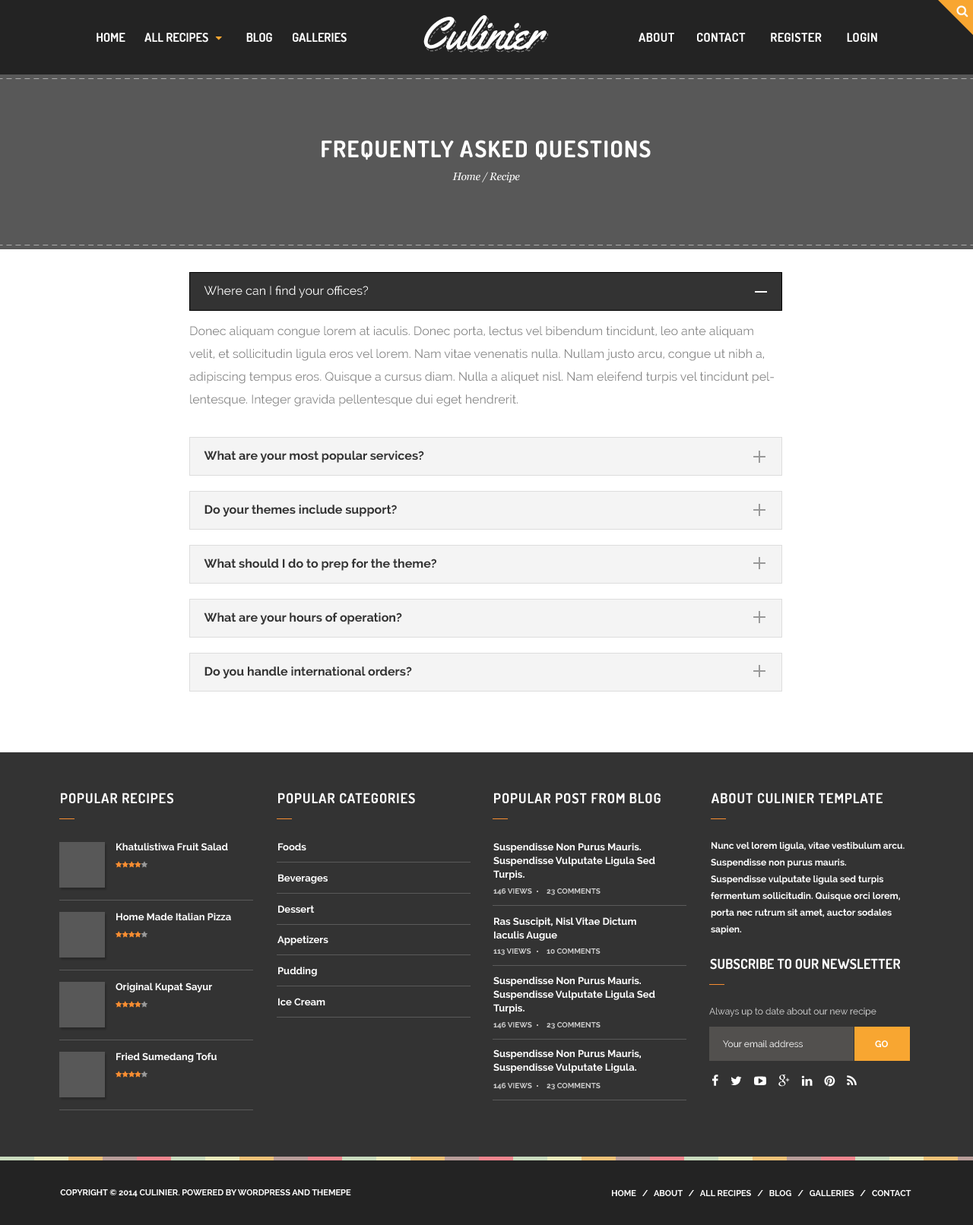
<style>
.page{position:relative;width:973px;height:1225px;background:#333333}
.page>*{position:absolute;margin:0}
.t1{font:45.6px "Yellowtail";color:#ffffff}
.t2{font:12.2px "Dosis-Bold";letter-spacing:0.025em;color:#ffffff;text-transform:uppercase}
.t3{font:22.8px "Dosis-Bold";letter-spacing:0.05em;color:#ffffff;text-transform:uppercase}
.t4{font:10.6px "Georgia-Italic";letter-spacing:-0.025em;color:#ffffff}
.t5{font:12.2px "Raleway";color:#ffffff}
.t6{font:12.2px/22.8px "Raleway";color:#878787}
.t7{font:12.2px "Raleway-Bold";color:#333333}
.t8{font:13.7px "Dosis-Bold";letter-spacing:0.05em;color:#ffffff;text-transform:uppercase}
.t9{font:9.9px "Raleway-Bold";color:#ffffff}
.t10{font:9.9px/13.7px "Raleway-Bold";color:#ffffff}
.t11{font:9.1px/16.7px "Raleway-Bold";color:#ffffff}
.t12{font:7.6px "Raleway-Bold";color:#cccccc;text-transform:uppercase}
.t13{font:13.7px "Dosis-Bold";letter-spacing:0.005em;color:#ffffff;text-transform:uppercase}
.t14{font:9.1px "Raleway";color:#dcdcdc}
.t15{font:9.1px "Raleway";color:#ffffff}
.t16{font:9.1px "Raleway-Bold";color:#ffffff}
.t17{font:8.4px "Raleway-Bold";color:#ffffff}
.t18{font:8.4px "Raleway-Bold";color:#ffffff;text-transform:uppercase}
</style>
<div class="page">
<p class="t1" style="left:423px;top:15px;width:124px;height:35px">Culinier</p>
<p class="t2" style="left:639px;top:33px;width:238px;height:10px">ABOUT        CONTACT         Register         login</p>
<p class="t3" style="left:322px;top:140px;width:329px;height:20px">FREQUENTLY ASKED QUESTIONS</p>
<p class="t4" style="left:452px;top:172px;width:68px;height:10px">Home / Recipe</p>
<p class="t5" style="left:204px;top:286px;width:164px;height:12px">Where can I find your offices?</p>
<p class="t6" style="left:189px;top:326px;width:585px;height:81px">Donec aliquam congue lorem at iaculis. Donec porta, lectus vel bibendum tincidunt, leo ante aliquam velit, et sollicitudin ligula eros vel lorem. Nam vitae venenatis nulla. Nullam justo arcu, congue ut nibh a, adipiscing tempus eros. Quisque a cursus diam. Nulla a aliquet nisl. Nam eleifend turpis vel tincidunt pellentesque. Integer gravida pellentesque dui eget hendrerit.</p>
<p class="t7" style="left:204px;top:451px;width:220px;height:12px">What are your most popular services?</p>
<p class="t7" style="left:204px;top:505px;width:193px;height:12px">Do your themes include support?</p>
<p class="t7" style="left:204px;top:559px;width:232px;height:12px">What should I do to prep for the theme?</p>
<p class="t7" style="left:204px;top:613px;width:198px;height:12px">What are your hours of operation?</p>
<p class="t7" style="left:204px;top:667px;width:208px;height:12px">Do you handle international orders?</p>
<p class="t8" style="left:61px;top:793px;width:112px;height:11px">POPULAR RECIPES</p>
<p class="t8" style="left:278px;top:793px;width:137px;height:11px">POPULAR CATEGORIES</p>
<p class="t8" style="left:494px;top:793px;width:167px;height:11px">POPULAR Post from blog</p>
<p class="t8" style="left:712px;top:793px;width:171px;height:11px">About CULINIER Template</p>
<p class="t9" style="left:116px;top:843px;width:112px;height:8px">Khatulistiwa Fruit Salad</p>
<p class="t9" style="left:278px;top:843px;width:28px;height:8px">Foods</p>
<p class="t10" style="left:493px;top:843px;width:162px;height:37px">Suspendisse Non Purus Mauris. <br>Suspendisse Vulputate Ligula Sed <br>Turpis.</p>
<p class="t11" style="left:711px;top:842px;width:194px;height:93px">Nunc vel lorem ligula, vitae vestibulum arcu. Suspendisse non purus mauris. <br>Suspendisse vulputate ligula sed turpis fermentum sollicitudin. Quisque orci lorem, porta nec rutrum sit amet, auctor sodales sapien.</p>
<p class="t9" style="left:278px;top:874px;width:50px;height:10px">Beverages</p>
<p class="t12" style="left:493px;top:889px;width:39px;height:7px">146 Views</p>
<p class="t12" style="left:547px;top:889px;width:54px;height:7px">23 Comments</p>
<p class="t9" style="left:278px;top:905px;width:37px;height:9px">Dessert</p>
<p class="t9" style="left:116px;top:913px;width:115px;height:8px">Home Made Italian Pizza</p>
<p class="t10" style="left:494px;top:918px;width:142px;height:23px">Ras Suscipit, Nisl Vitae Dictum <br>Iaculis Augue</p>
<p class="t9" style="left:277px;top:936px;width:51px;height:10px">Appetizers</p>
<p class="t12" style="left:493px;top:949px;width:38px;height:7px">113 Views</p>
<p class="t12" style="left:547px;top:949px;width:54px;height:5px">10 Comments</p>
<p class="t13" style="left:710px;top:959px;width:190px;height:11px">Subscribe to our newsletter</p>
<p class="t9" style="left:278px;top:967px;width:39px;height:10px">Pudding</p>
<p class="t10" style="left:493px;top:977px;width:162px;height:37px">Suspendisse Non Purus Mauris. <br>Suspendisse Vulputate Ligula Sed <br>Turpis.</p>
<p class="t9" style="left:116px;top:983px;width:96px;height:10px">Original Kupat Sayur</p>
<p class="t9" style="left:278px;top:998px;width:47px;height:9px">Ice Cream</p>
<p class="t14" style="left:709px;top:1008px;width:168px;height:9px">Always up to date about our new recipe</p>
<p class="t12" style="left:493px;top:1022px;width:39px;height:7px">146 Views</p>
<p class="t12" style="left:547px;top:1022px;width:54px;height:7px">23 Comments</p>
<p class="t10" style="left:493px;top:1050px;width:148px;height:23px">Suspendisse Non Purus Mauris, <br>Suspendisse Vulputate Ligula.</p>
<p class="t15" style="left:723px;top:1041px;width:80px;height:7px">Your email address</p>
<p class="t16" style="left:875px;top:1041px;width:13px;height:7px">GO</p>
<p class="t9" style="left:116px;top:1053px;width:101px;height:10px">Fried Sumedang Tofu</p>
<p class="t12" style="left:493px;top:1083px;width:39px;height:7px">146 Views</p>
<p class="t12" style="left:547px;top:1083px;width:54px;height:7px">23 Comments</p>
<p class="t17" style="left:60px;top:1190px;width:291px;height:7px">COPYRIGHT © 2014 CULINIER. POWERED BY WORDPRESS AND THEMEPE</p>
<p class="t18" style="left:612px;top:1190px;width:299px;height:7px">Home   /   About   /   All Recipes   /   Blog   /   Galleries   /   Contact</p>
</div>
